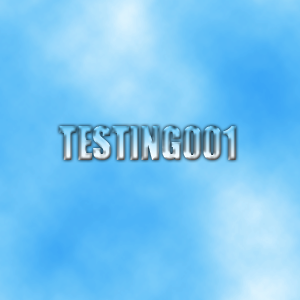
<style>
.page{position:relative;width:300px;height:300px}
.page>*{position:absolute;margin:0}
.t1{font:43px "Impact";scale:0.88 1}
</style>
<div class="page">
<p class="t1" style="left:59px;top:126px;width:177px;height:34px">TESTING001</p>
</div>
